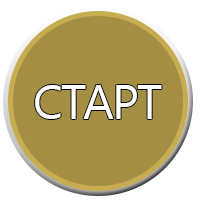
<style>
.page{position:relative;width:200px;height:200px;background:#a38e44}
.page>*{position:absolute;margin:0}
.t1{font:48px "SegoeUI";letter-spacing:-0.05em;color:#ffffff}
</style>
<div class="page">
<p class="t1" style="left:35px;top:85px;width:127px;height:34px">СТАРТ</p>
</div>
